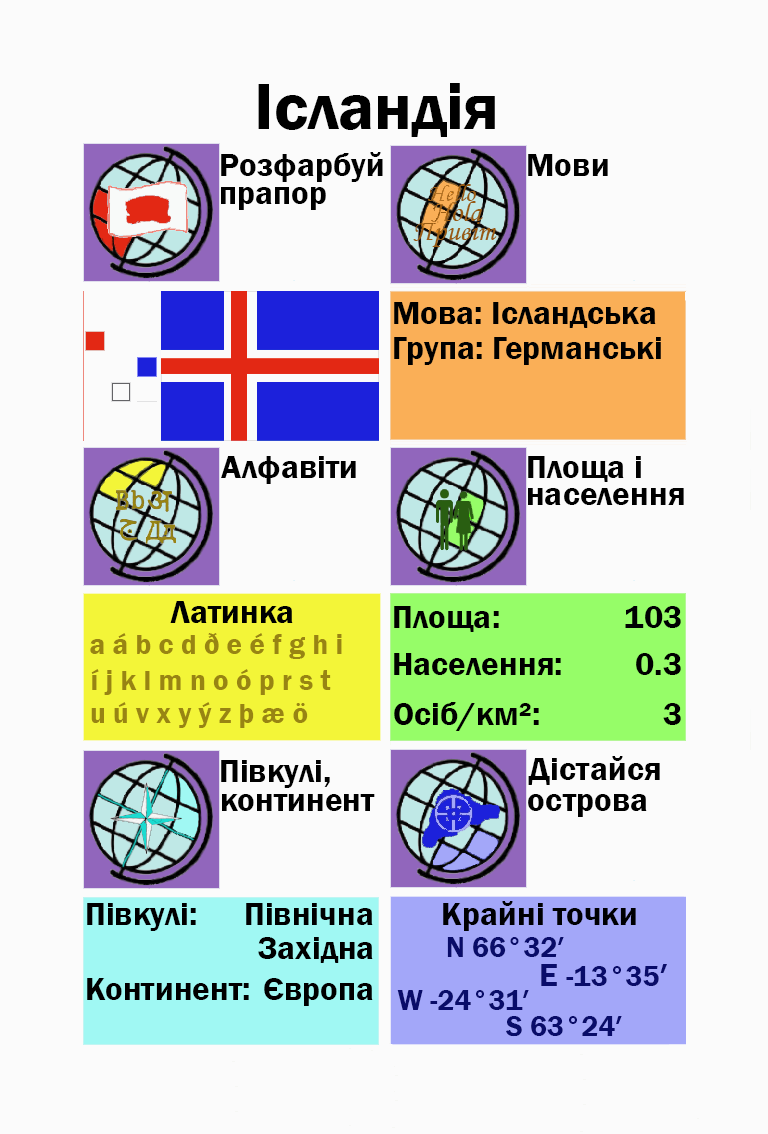
<style>
.page{position:relative;width:768px;height:1134px;background:#fbfbfb}
.page>*{position:absolute;margin:0}
.t1{font:66.7px "FranklinGothic-Demi";color:#000000}
.t2{font:33.3px "FranklinGothic-Demi";color:#000000}
.t3{font:33.3px "FranklinGothic-Demi";color:#000003}
.t4{font:29.2px "FranklinGothic-Demi";color:#988413}
.t5{font:29.2px "FranklinGothic-Demi";color:#090c69}
.t6{font:33.3px "FranklinGothic-Demi";color:#090c69}
</style>
<div class="page">
<p class="t1" style="left:258px;top:83px;width:237px;height:54px">Ісландія</p>
<p class="t2" style="left:221px;top:152px;width:162px;height:30px">Розфарбуй</p>
<p class="t2" style="left:528px;top:154px;width:80px;height:22px">Мови</p>
<p class="t2" style="left:221px;top:187px;width:105px;height:23px">прапор</p>
<p class="t2" style="left:394px;top:302px;width:262px;height:26px">Мова: Ісландська</p>
<p class="t2" style="left:394px;top:337px;width:267px;height:28px">Група: Германські</p>
<p class="t2" style="left:221px;top:456px;width:135px;height:28px">Алфавіти</p>
<p class="t2" style="left:528px;top:456px;width:113px;height:26px">Площа і</p>
<p class="t2" style="left:528px;top:488px;width:156px;height:17px">населення</p>
<p class="t2" style="left:170px;top:601px;width:123px;height:22px">Латинка</p>
<p class="t2" style="left:394px;top:606px;width:105px;height:26px">Площа:</p>
<p class="t3" style="left:625px;top:606px;width:56px;height:22px">103</p>
<p class="t4" style="left:90px;top:633px;width:252px;height:26px">a á b c d ð e é f g h i</p>
<p class="t2" style="left:394px;top:653px;width:167px;height:22px">Населення:</p>
<p class="t2" style="left:636px;top:653px;width:45px;height:22px">0.3</p>
<p class="t4" style="left:91px;top:669px;width:240px;height:26px">í j k l m n o ó p r s t</p>
<p class="t4" style="left:91px;top:702px;width:217px;height:26px">u ú v x y ý z þ æ ö</p>
<p class="t2" style="left:394px;top:702px;width:145px;height:29px">Осіб/км²:</p>
<p class="t2" style="left:663px;top:703px;width:18px;height:22px">3</p>
<p class="t2" style="left:221px;top:760px;width:109px;height:28px">Півкулі,</p>
<p class="t2" style="left:528px;top:756px;width:132px;height:29px">Дістайся</p>
<p class="t2" style="left:222px;top:794px;width:153px;height:17px">континент</p>
<p class="t2" style="left:528px;top:794px;width:119px;height:23px">острова</p>
<p class="t2" style="left:87px;top:903px;width:109px;height:28px">Півкулі:</p>
<p class="t2" style="left:246px;top:903px;width:127px;height:22px">Північна</p>
<p class="t3" style="left:443px;top:901px;width:193px;height:30px">Крайні точки</p>
<p class="t2" style="left:258px;top:937px;width:115px;height:26px">Західна</p>
<p class="t5" style="left:447px;top:937px;width:117px;height:20px">N 66°32′</p>
<p class="t5" style="left:541px;top:964px;width:126px;height:22px"><span class="t6">E </span>-13°35<span class="t6">′</span></p>
<p class="t2" style="left:87px;top:978px;width:162px;height:22px">Континент:</p>
<p class="t2" style="left:264px;top:978px;width:109px;height:28px">Європа</p>
<p class="t5" style="left:397px;top:990px;width:132px;height:20px">W -24°31′</p>
<p class="t5" style="left:506px;top:1016px;width:116px;height:21px">S 63°24′</p>
</div>
